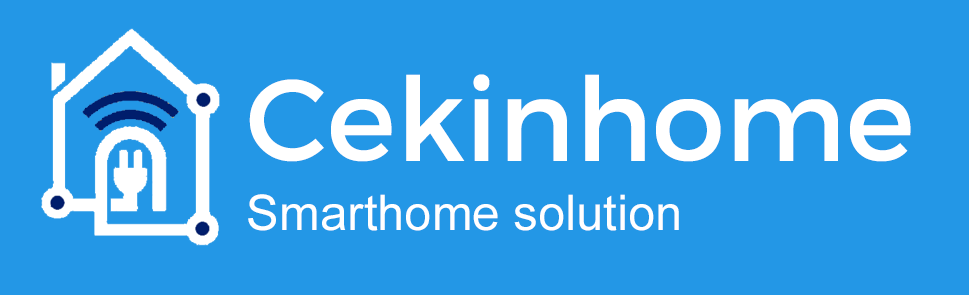
<style>
.page{position:relative;width:969px;height:295px;background:#2397e6}
.page>*{position:absolute;margin:0}
.t1{font:116px "ArgentumSans-Regular";color:#ffffff}
.t2{font:49px "ArialMT";color:#ffffff}
</style>
<div class="page">
<p class="t1" style="left:249px;top:74px;width:662px;height:88px">Cekinhome</p>
<p class="t2" style="left:248px;top:194px;width:431px;height:37px">Smarthome solution</p>
</div>
